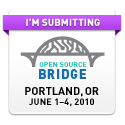
<style>
.page{position:relative;width:125px;height:125px;background:#ffffff}
.page>*{position:absolute;margin:0}
.t1{font:10px "DIN-Black";color:#ffffff}
.t2{font:7px "DINPro-Bold";letter-spacing:0.02em;color:#08b9a6}
.t3{font:13px "DINPro-Black";letter-spacing:0.06em;color:#116db6}
.t4{font:13px "DINPro-Black";letter-spacing:0.02em;color:#116db6}
.t5{font:13px "DINPro-Black";letter-spacing:0.03em;color:#116db6}
.t6{font:9px/10px "DIN-Bold";letter-spacing:0.02em;color:#000000}
.t7{font:11px/10px "DIN-Bold";color:#000000}
</style>
<div class="page">
<p class="t1" style="left:26px;top:18px;width:74px;height:8px">I’M SUBMITTING</p>
<p class="t2" style="left:39px;top:62px;width:48px;height:5px">OPEN SOURCE</p>
<p class="t3" style="left:39px;top:69px;width:47px;height:10px"><span class="t4">B</span>RI<span class="t5">D</span><span class="t4">GE</span></p>
<p class="t6" style="left:25px;top:87px;width:74px;height:20px;text-align:center"><span class="t7">PORTLAND, OR<br></span>JUNE 1–4, 2010</p>
</div>
